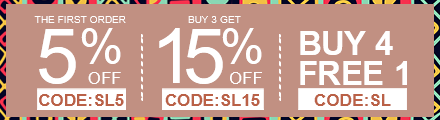
<style>
.page{position:relative;width:440px;height:120px;background:#c19082}
.page>*{position:absolute;margin:0}
.t1{font:10.2px "ArialMT";color:#ffffff;text-transform:uppercase}
.t2{font:77.3px "ArialMT";color:#ffffff}
.t3{font:50.5px "ArialMT";color:#ffffff}
.t4{font:77.3px "ArialMT";letter-spacing:-0.14em;color:#ffffff}
.t5{font:33.1px/29.8px "Arial-BoldMT";color:#ffffff;text-transform:uppercase}
.t6{font:16.9px "ArialMT";color:#ffffff}
.t7{font:17.1px "Arial-BoldMT";color:#ba6147}
</style>
<div class="page">
<p class="t1" style="left:34px;top:16px;width:92px;height:7px">the first order</p>
<p class="t1" style="left:188px;top:16px;width:53px;height:7px">Buy 3 get</p>
<p class="t2" style="left:39px;top:29px;width:37px;height:55px">5</p>
<p class="t3" style="left:81px;top:28px;width:40px;height:36px">%</p>
<p class="t4" style="left:159px;top:28px;width:64px;height:56px">15</p>
<p class="t3" style="left:222px;top:28px;width:40px;height:36px">%</p>
<p class="t5" style="left:300px;top:31px;width:107px;height:54px">Buy 4 <br>free 1</p>
<p class="t6" style="left:88px;top:72px;width:33px;height:12px">OFF</p>
<p class="t6" style="left:230px;top:72px;width:32px;height:12px">OFF</p>
<p class="t7" style="left:39px;top:94px;width:85px;height:12px">CODE:SL5</p>
<p class="t7" style="left:165px;top:94px;width:95px;height:12px">CODE:SL15</p>
<p class="t7" style="left:314px;top:94px;width:77px;height:12px">CODE:SL</p>
</div>
